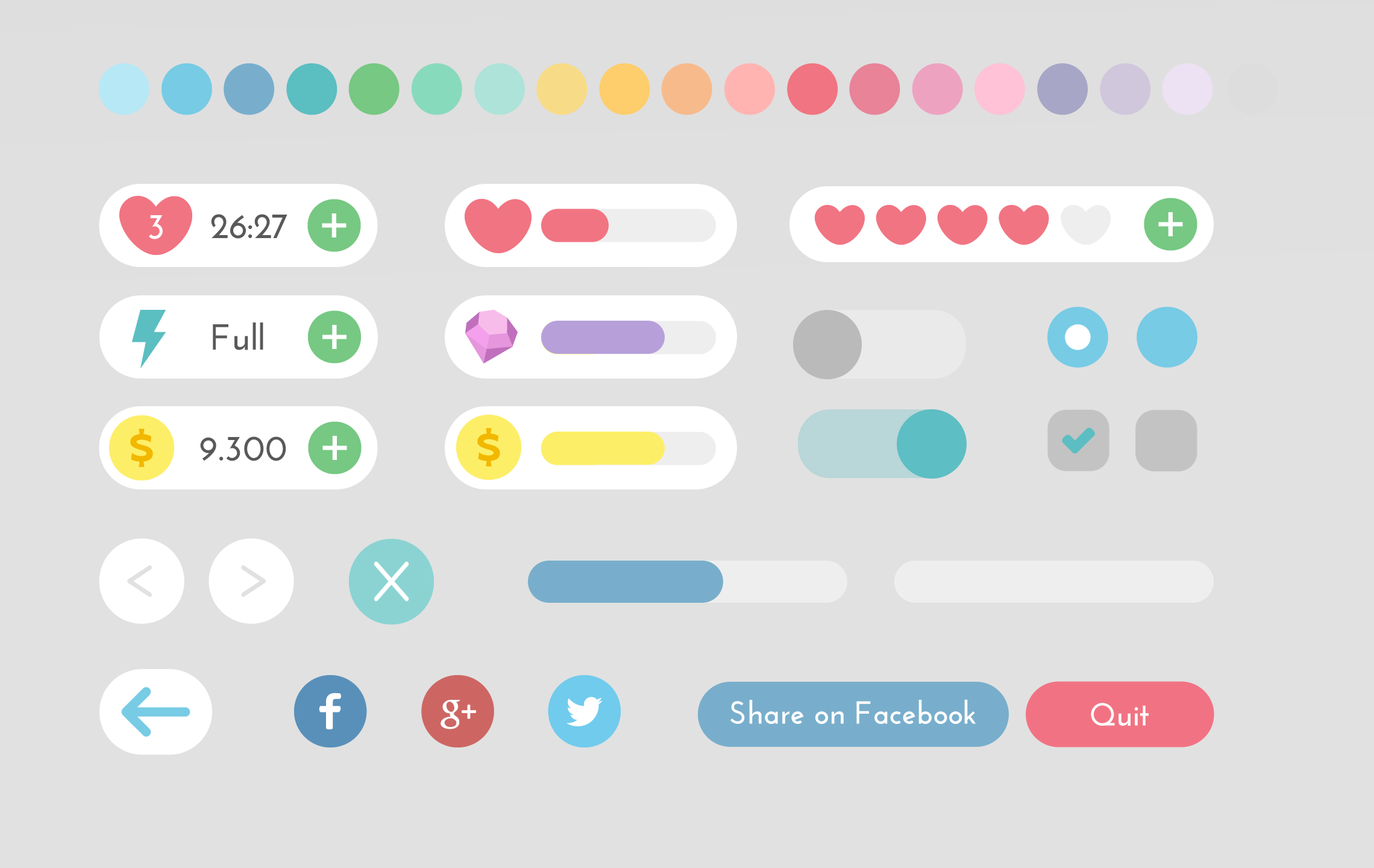
<style>
.page{position:relative;width:1374px;height:868px;background:#e1e1e1}
.page>*{position:absolute;margin:0}
.t1{font:36.2px "JosefinSans-Bold";color:#ffffff}
.t2{font:36.2px "JosefinSans-Bold";color:#595959}
.t3{font:31.7px "JosefinSans-Bold";color:#ffffff}
</style>
<div class="page">
<p class="t1" style="left:149px;top:215px;width:14px;height:24px">3</p>
<p class="t2" style="left:211px;top:214px;width:76px;height:25px">26:27</p>
<p class="t2" style="left:213px;top:322px;width:50px;height:28px">Full</p>
<p class="t2" style="left:200px;top:436px;width:86px;height:25px">9.300</p>
<p class="t3" style="left:730px;top:699px;width:246px;height:25px">Share on Facebook</p>
<p class="t3" style="left:1091px;top:703px;width:58px;height:23px">Quit</p>
</div>
